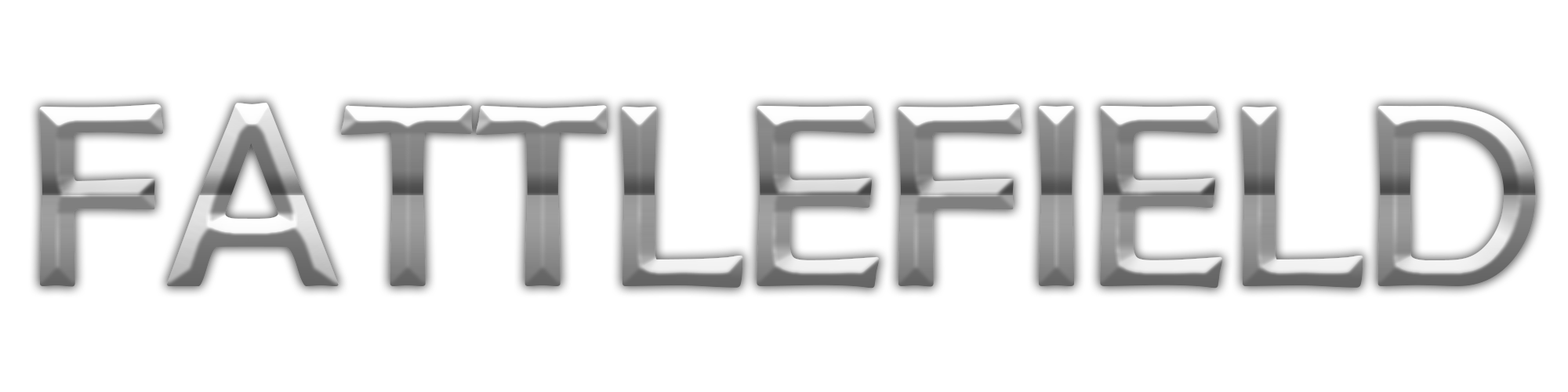
<style>
.page{position:relative;width:1568px;height:392px;background:#ffffff}
.page>*{position:absolute;margin:0}
.t1{font:262.3px "BerlinSansFB-Reg"}
</style>
<div class="page">
<p class="t1" style="left:39px;top:103px;width:1497px;height:186px">FATTLEFIELD</p>
</div>
